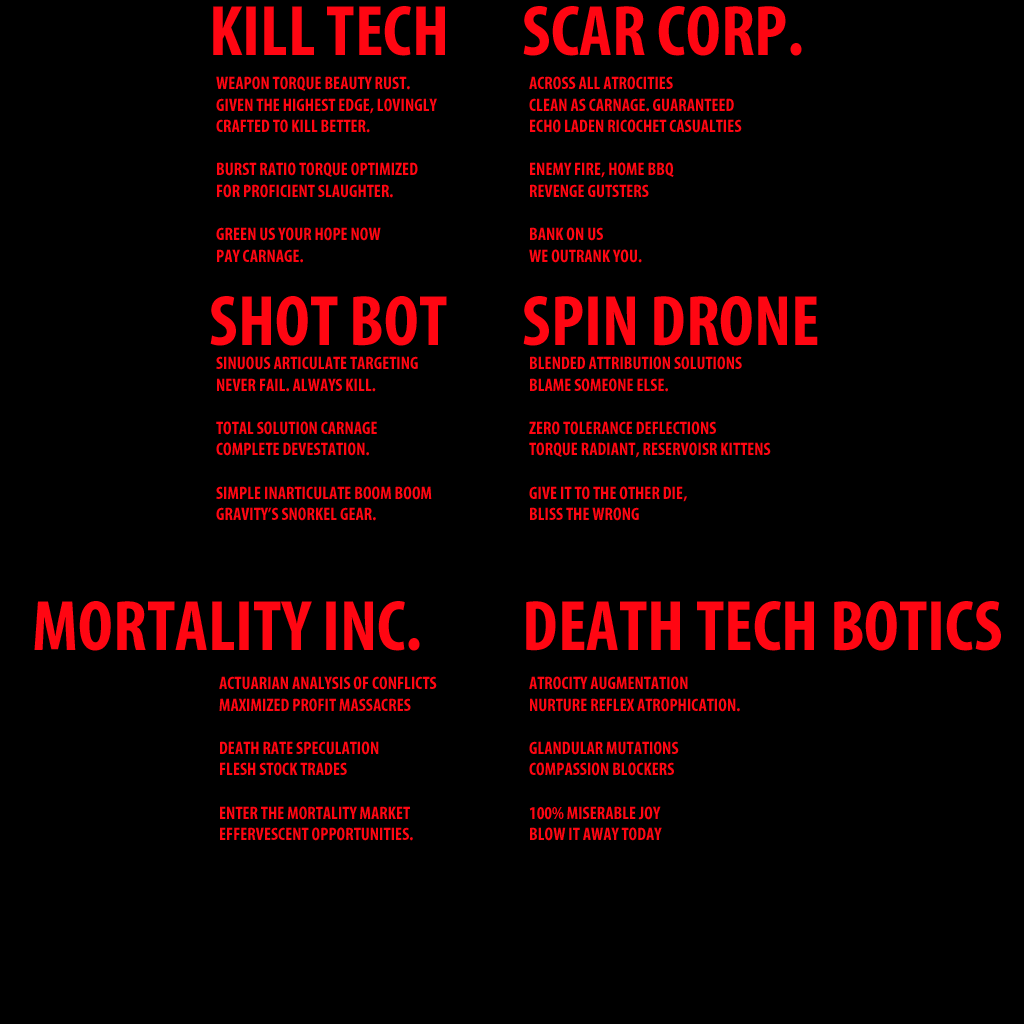
<style>
.page{position:relative;width:1024px;height:1024px;background:#000000}
.page>*{position:absolute;margin:0}
.t1{font:72px "MyriadPro-BoldCond";color:#ff0612}
.t2{font:18px "MyriadPro-BoldCond";color:#ff0612}
</style>
<div class="page">
<p class="t1" style="left:213px;top:6px;width:232px;height:50px">KILL TECH</p>
<p class="t1" style="left:523px;top:6px;width:279px;height:50px">SCAR CORP.</p>
<p class="t2" style="left:216px;top:76px;width:221px;height:187px">WEAPON TORQUE BEAUTY RUST.<br>GIVEN THE HIGHEST EDGE, LOVINGLY <br>CRAFTED TO KILL BETTER.<br><br>BURST RATIO TORQUE OPTIMIZED<br>FOR PROFICIENT SLAUGHTER.<br><br>GREEN US YOUR HOPE NOW<br>PAY CARNAGE.</p>
<p class="t2" style="left:529px;top:76px;width:213px;height:187px">ACROSS ALL ATROCITIES<br>CLEAN AS CARNAGE. GUARANTEED<br>ECHO LADEN RICOCHET CASUALTIES<br><br>ENEMY FIRE, HOME BBQ<br>REVENGE GUTSTERS<br><br>BANK ON US<br>WE OUTRANK YOU.</p>
<p class="t1" style="left:210px;top:296px;width:237px;height:50px">SHOT BOT</p>
<p class="t1" style="left:523px;top:296px;width:295px;height:50px">SPIN DRONE</p>
<p class="t2" style="left:216px;top:356px;width:216px;height:165px">SINUOUS ARTICULATE TARGETING<br>NEVER FAIL. ALWAYS KILL.<br><br>TOTAL SOLUTION CARNAGE<br>COMPLETE DEVESTATION. <br><br>SIMPLE INARTICULATE BOOM BOOM<br>GRAVITY’S SNORKEL GEAR.</p>
<p class="t2" style="left:529px;top:356px;width:242px;height:165px">BLENDED ATTRIBUTION SOLUTIONS<br>BLAME SOMEONE ELSE. <br><br>ZERO TOLERANCE DEFLECTIONS<br>TORQUE RADIANT, RESERVOISR KITTENS<br><br>GIVE IT TO THE OTHER DIE,<br>BLISS THE WRONG</p>
<p class="t1" style="left:34px;top:601px;width:386px;height:50px">MORTALITY INC.</p>
<p class="t1" style="left:526px;top:601px;width:475px;height:50px">DEATH TECH BOTICS</p>
<p class="t2" style="left:219px;top:676px;width:218px;height:165px">ACTUARIAN ANALYSIS OF CONFLICTS<br>MAXIMIZED PROFIT MASSACRES<br><br>DEATH RATE SPECULATION<br>FLESH STOCK TRADES<br><br>ENTER THE MORTALITY MARKET<br>EFFERVESCENT OPPORTUNITIES.</p>
<p class="t2" style="left:529px;top:676px;width:211px;height:165px">ATROCITY AUGMENTATION<br>NURTURE REFLEX ATROPHICATION.<br><br>GLANDULAR MUTATIONS<br>COMPASSION BLOCKERS<br><br>100% MISERABLE JOY<br>BLOW IT AWAY TODAY</p>
</div>
